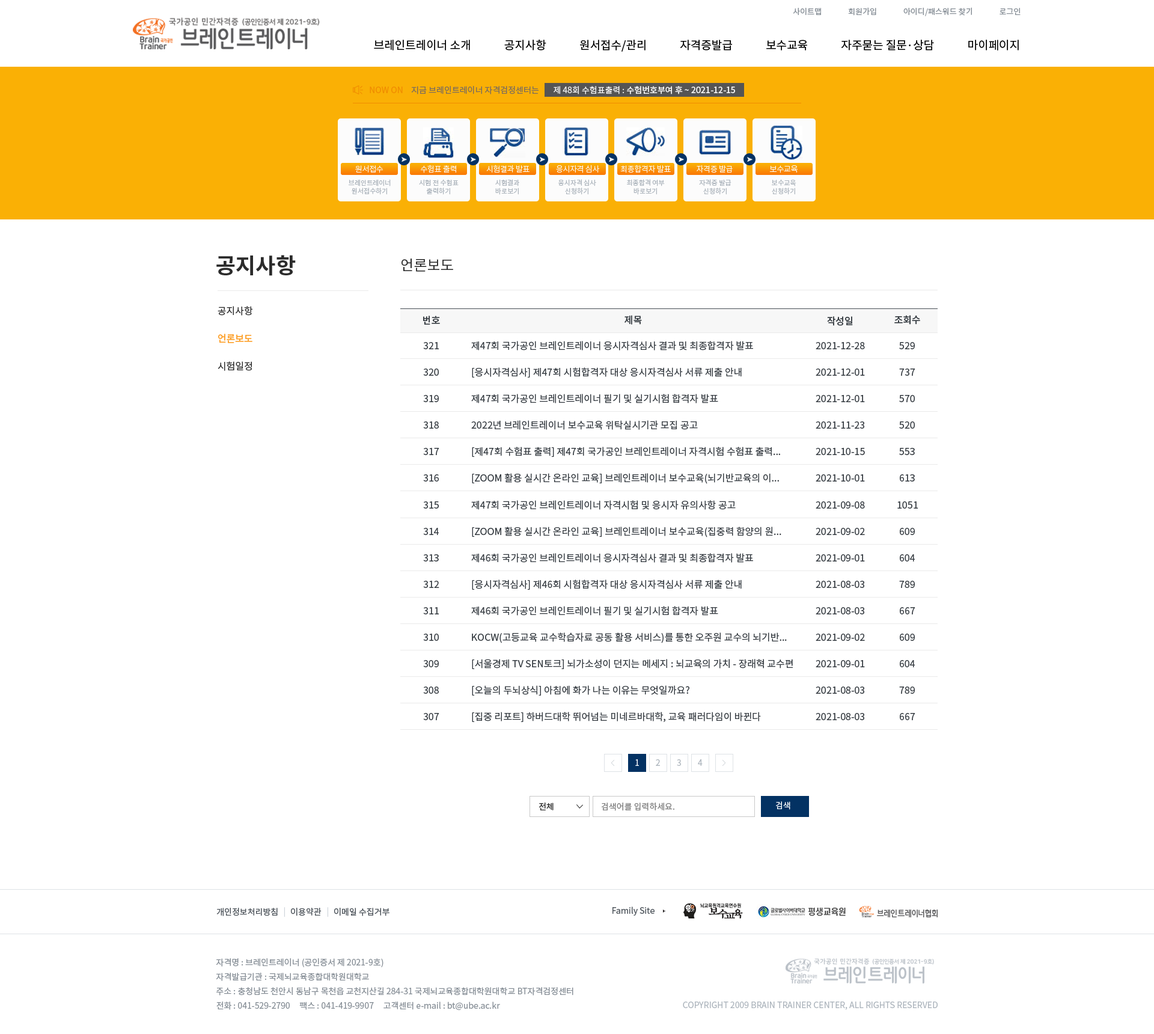
<style>
.page{position:relative;width:1154px;height:1034px;background:#ffffff}
.page>*{position:absolute;margin:0}
.t1{font:7.8px "NotoSansCJKkr-Regular";letter-spacing:0.001em;color:#868e96}
.t2{font:11.4px "NotoSansCJKkr-Regular";color:#000000}
.t3{font:8.4px "NotoSansCJKkr-Regular";color:#f08c00}
.t4{font:8.4px "NotoSansCJKkr-Regular";color:#7c6d5d}
.t5{font:8.4px "NotoSansCJKkr-Medium";color:#f8f8f8}
.t6{font:8.4px "NotoSansCJKkr-Regular";color:#f8f8f8}
.t7{font:7.8px "NotoSansCJKkr-Light";letter-spacing:-0.025em;color:#fcfcfc}
.t8{font:6.6px/8.4px "NotoSansCJKkr-Regular";color:#adb5bd}
.t9{font:21.6px "NotoSansCJKkr-Bold";color:#2b2b2b}
.t10{font:14.4px "NotoSansCJKkr-Regular";color:#2b2b2b}
.t11{font:9.6px "NotoSansCJKkr-Regular";color:#2b2b2b}
.t12{font:9.6px "NotoSansCJKkr-Medium";color:#343a40}
.t13{font:9.6px "NotoSansCJKkr-Medium";color:#fd9f27}
.t14{font:9.6px "NotoSansCJKkr-Regular";color:#343a40}
.t15{font:8.4px "NotoSansCJKkr-Regular";color:#ffffff}
.t16{font:8.4px "NotoSansCJKkr-Regular";color:#adb5bd}
.t17{font:8.4px "NotoSansCJKkr-Regular";color:#2b2b2b;text-transform:uppercase}
.t18{font:8.4px "NotoSansCJKkr-Regular";color:#7e7e7e;text-transform:uppercase}
.t19{font:8.4px "NotoSansCJKkr-Regular";color:#ffffff;text-transform:uppercase}
.t20{font:8.4px "NotoSansCJKkr-Regular";color:#495057}
.t21{font:8.4px "NotoSansCJKkr-Regular";color:#ced4da}
.t22{font:8.4px/14.4px "NotoSansCJKkr-Regular";color:#868e96}
</style>
<div class="page">
<p class="t1" style="left:793px;top:7px;width:227px;height:9px">사이트맵               회원가입               아이디/패스워드 찾기               로그인</p>
<p class="t2" style="left:374px;top:39px;width:645px;height:13px">브레인트레이너 소개             공지사항             원서접수/관리             자격증발급             보수교육             자주묻는 질문·상담             마이페이지</p>
<p class="t3" style="left:370px;top:87px;width:33px;height:6px">NOW ON</p>
<p class="t4" style="left:411px;top:86px;width:128px;height:8px">지금 브레인트레이너 자격검정센터는</p>
<p class="t5" style="left:553px;top:86px;width:182px;height:8px"><span class="t6">제 48회 수험표출력 : </span>수험번호부여 후 ~ 2021-12-15</p>
<p class="t7" style="left:355px;top:165px;width:28px;height:8px">원서접수</p>
<p class="t7" style="left:421px;top:165px;width:35px;height:8px">수험표 출력</p>
<p class="t7" style="left:486px;top:165px;width:43px;height:7px">시험결과 발표</p>
<p class="t7" style="left:556px;top:165px;width:44px;height:8px">응시자격 심사</p>
<p class="t7" style="left:620px;top:165px;width:51px;height:8px">최종합격자 발표</p>
<p class="t7" style="left:696px;top:165px;width:36px;height:8px">자격증 발급</p>
<p class="t7" style="left:769px;top:165px;width:28px;height:8px">보수교육</p>
<p class="t8" style="left:349px;top:179px;width:42px;height:16px;text-align:center">브레인트레이너<br>원서접수하기</p>
<p class="t8" style="left:419px;top:179px;width:39px;height:16px;text-align:center">시험 전 수험표<br>출력하기</p>
<p class="t8" style="left:495px;top:179px;width:24px;height:16px;text-align:center">시험결과<br>바로보기</p>
<p class="t8" style="left:558px;top:179px;width:38px;height:16px;text-align:center">응시자격 심사<br>신청하기</p>
<p class="t8" style="left:627px;top:179px;width:38px;height:16px;text-align:center">최종합격 여부<br>바로보기</p>
<p class="t8" style="left:699px;top:179px;width:32px;height:16px;text-align:center">자격증 발급<br>신청하기</p>
<p class="t8" style="left:772px;top:179px;width:24px;height:16px;text-align:center">보수교육<br>신청하기</p>
<p class="t9" style="left:216px;top:255px;width:80px;height:21px">공지사항</p>
<p class="t10" style="left:401px;top:258px;width:52px;height:14px">언론보도</p>
<p class="t11" style="left:218px;top:306px;width:35px;height:9px">공지사항</p>
<p class="t12" style="left:423px;top:315px;width:17px;height:9px">번호</p>
<p class="t12" style="left:624px;top:315px;width:18px;height:9px">제목</p>
<p class="t12" style="left:827px;top:316px;width:26px;height:10px">작성일</p>
<p class="t12" style="left:894px;top:315px;width:26px;height:9px">조회수</p>
<p class="t13" style="left:218px;top:333px;width:34px;height:10px">언론보도</p>
<p class="t14" style="left:423px;top:342px;width:16px;height:7px">321</p>
<p class="t14" style="left:471px;top:341px;width:282px;height:9px">제47회 국가공인 브레인트레이너 응시자격심사 결과 및 최종합격자 발표</p>
<p class="t14" style="left:815px;top:342px;width:50px;height:7px">2021-12-28</p>
<p class="t14" style="left:899px;top:342px;width:16px;height:7px">529</p>
<p class="t11" style="left:218px;top:361px;width:34px;height:10px">시험일정</p>
<p class="t14" style="left:423px;top:368px;width:16px;height:8px">320</p>
<p class="t14" style="left:472px;top:367px;width:270px;height:10px">[응시자격심사] 제47회 시험합격자 대상 응시자격심사 서류 제출 안내</p>
<p class="t14" style="left:815px;top:368px;width:50px;height:8px">2021-12-01</p>
<p class="t14" style="left:899px;top:368px;width:16px;height:8px">737</p>
<p class="t14" style="left:423px;top:395px;width:16px;height:7px">319</p>
<p class="t14" style="left:471px;top:394px;width:247px;height:9px">제47회 국가공인 브레인트레이너 필기 및 실기시험 합격자 발표</p>
<p class="t14" style="left:815px;top:395px;width:50px;height:7px">2021-12-01</p>
<p class="t14" style="left:899px;top:395px;width:16px;height:7px">570</p>
<p class="t14" style="left:423px;top:421px;width:16px;height:7px">318</p>
<p class="t14" style="left:471px;top:420px;width:227px;height:10px">2022년 브레인트레이너 보수교육 위탁실시기관 모집 공고</p>
<p class="t14" style="left:815px;top:421px;width:49px;height:7px">2021-11-23</p>
<p class="t14" style="left:899px;top:421px;width:16px;height:7px">520</p>
<p class="t14" style="left:423px;top:448px;width:16px;height:7px">317</p>
<p class="t14" style="left:472px;top:446px;width:308px;height:11px">[제47회 수험표 출력] 제47회 국가공인 브레인트레이너 자격시험 수험표 출력...</p>
<p class="t14" style="left:815px;top:448px;width:50px;height:7px">2021-10-15</p>
<p class="t14" style="left:899px;top:448px;width:16px;height:7px">553</p>
<p class="t14" style="left:472px;top:473px;width:307px;height:11px">[ZOOM 활용 실시간 온라인 교육] 브레인트레이너 보수교육(뇌기반교육의 이...</p>
<p class="t14" style="left:423px;top:474px;width:16px;height:7px">316</p>
<p class="t14" style="left:815px;top:474px;width:50px;height:7px">2021-10-01</p>
<p class="t14" style="left:900px;top:474px;width:15px;height:7px">613</p>
<p class="t14" style="left:423px;top:501px;width:16px;height:7px">315</p>
<p class="t14" style="left:471px;top:500px;width:265px;height:10px">제47회 국가공인 브레인트레이너 자격시험 및 응시자 유의사항 공고</p>
<p class="t14" style="left:815px;top:501px;width:50px;height:7px">2021-09-08</p>
<p class="t14" style="left:897px;top:501px;width:21px;height:7px">1051</p>
<p class="t14" style="left:423px;top:528px;width:16px;height:7px">314</p>
<p class="t14" style="left:472px;top:526px;width:309px;height:11px">[ZOOM 활용 실시간 온라인 교육] 브레인트레이너 보수교육(집중력 함양의 원...</p>
<p class="t14" style="left:815px;top:528px;width:50px;height:7px">2021-09-02</p>
<p class="t14" style="left:900px;top:528px;width:15px;height:7px">609</p>
<p class="t14" style="left:423px;top:554px;width:16px;height:7px">313</p>
<p class="t14" style="left:471px;top:553px;width:282px;height:9px">제46회 국가공인 브레인트레이너 응시자격심사 결과 및 최종합격자 발표</p>
<p class="t14" style="left:815px;top:554px;width:50px;height:7px">2021-09-01</p>
<p class="t14" style="left:900px;top:554px;width:15px;height:7px">604</p>
<p class="t14" style="left:423px;top:580px;width:16px;height:8px">312</p>
<p class="t14" style="left:472px;top:579px;width:270px;height:10px">[응시자격심사] 제46회 시험합격자 대상 응시자격심사 서류 제출 안내</p>
<p class="t14" style="left:815px;top:580px;width:49px;height:8px">2021-08-03</p>
<p class="t14" style="left:899px;top:580px;width:16px;height:8px">789</p>
<p class="t14" style="left:471px;top:606px;width:247px;height:9px">제46회 국가공인 브레인트레이너 필기 및 실기시험 합격자 발표</p>
<p class="t14" style="left:423px;top:607px;width:16px;height:7px">311</p>
<p class="t14" style="left:815px;top:607px;width:49px;height:7px">2021-08-03</p>
<p class="t14" style="left:900px;top:607px;width:15px;height:7px">667</p>
<p class="t14" style="left:423px;top:633px;width:16px;height:8px">310</p>
<p class="t14" style="left:472px;top:632px;width:315px;height:11px">KOCW(고등교육 교수학습자료 공동 활용 서비스)를 통한 오주원 교수의 뇌기반...</p>
<p class="t14" style="left:815px;top:633px;width:50px;height:8px">2021-09-02</p>
<p class="t14" style="left:900px;top:633px;width:15px;height:8px">609</p>
<p class="t14" style="left:423px;top:660px;width:16px;height:7px">309</p>
<p class="t14" style="left:472px;top:659px;width:321px;height:10px">[서울경제 TV SEN토크] 뇌가소성이 던지는 메세지 : 뇌교육의 가치 - 장래혁 교수편</p>
<p class="t14" style="left:815px;top:660px;width:50px;height:7px">2021-09-01</p>
<p class="t14" style="left:900px;top:660px;width:15px;height:7px">604</p>
<p class="t14" style="left:423px;top:686px;width:16px;height:7px">308</p>
<p class="t14" style="left:472px;top:685px;width:217px;height:10px">[오늘의 두뇌상식] 아침에 화가 나는 이유는 무엇일까요?</p>
<p class="t14" style="left:815px;top:686px;width:49px;height:7px">2021-08-03</p>
<p class="t14" style="left:899px;top:686px;width:16px;height:7px">789</p>
<p class="t14" style="left:423px;top:713px;width:16px;height:7px">307</p>
<p class="t14" style="left:472px;top:711px;width:289px;height:11px">[집중 리포트] 하버드대학 뛰어넘는 미네르바대학, 교육 패러다임이 바뀐다</p>
<p class="t14" style="left:815px;top:713px;width:49px;height:7px">2021-08-03</p>
<p class="t14" style="left:900px;top:713px;width:15px;height:7px">667</p>
<p class="t15" style="left:635px;top:759px;width:4px;height:7px">1</p>
<p class="t16" style="left:656px;top:759px;width:4px;height:7px">2</p>
<p class="t16" style="left:677px;top:759px;width:4px;height:7px">3</p>
<p class="t16" style="left:698px;top:759px;width:4px;height:7px">4</p>
<p class="t17" style="left:539px;top:802px;width:14px;height:8px">전체</p>
<p class="t18" style="left:602px;top:802px;width:72px;height:9px">검색어를 입력하세요.</p>
<p class="t19" style="left:776px;top:801px;width:14px;height:8px">검색</p>
<p class="t20" style="left:216px;top:907px;width:62px;height:9px">개인정보처리방침</p>
<p class="t21" style="left:284px;top:907px;width:1px;height:9px">|</p>
<p class="t20" style="left:291px;top:907px;width:30px;height:9px">이용약관</p>
<p class="t21" style="left:327px;top:907px;width:1px;height:9px">|</p>
<p class="t20" style="left:334px;top:907px;width:55px;height:9px">이메일 수집거부</p>
<p class="t20" style="left:612px;top:906px;width:42px;height:9px">Family Site</p>
<p class="t22" style="left:216px;top:958px;width:357px;height:52px">자격명 : 브레인트레이너 (공인증서 제 2021-9호)<br>자격발급기관 : 국제뇌교육종합대학원대학교<br>주소 : 충청남도 천안시 동남구 목천읍 교천지산길 284-31 국제뇌교육종합대학원대학교 BT자격검정센터<br>전화 : 041-529-2790     팩스 : 041-419-9907     고객센터 e-mail : bt@ube.ac.kr</p>
<p class="t16" style="left:683px;top:1001px;width:254px;height:9px">COPYRIGHT 2009 BRAIN TRAINER CENTER, ALL RIGHTS RESERVED</p>
</div>
